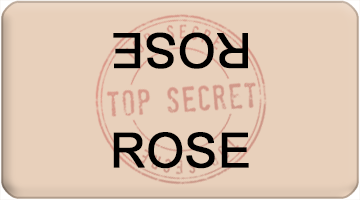
<style>
.page{position:relative;width:360px;height:200px;background:#e8d0bb}
.page>*{position:absolute;margin:0}
.t1{font:48px "ArialMT";color:#000000;font-weight:bold}
</style>
<div class="page">
<p class="t1" style="left:113px;top:32px;width:135px;height:37px;rotate:180deg">ROSE</p>
<p class="t1" style="left:113px;top:132px;width:136px;height:37px">ROSE</p>
</div>
